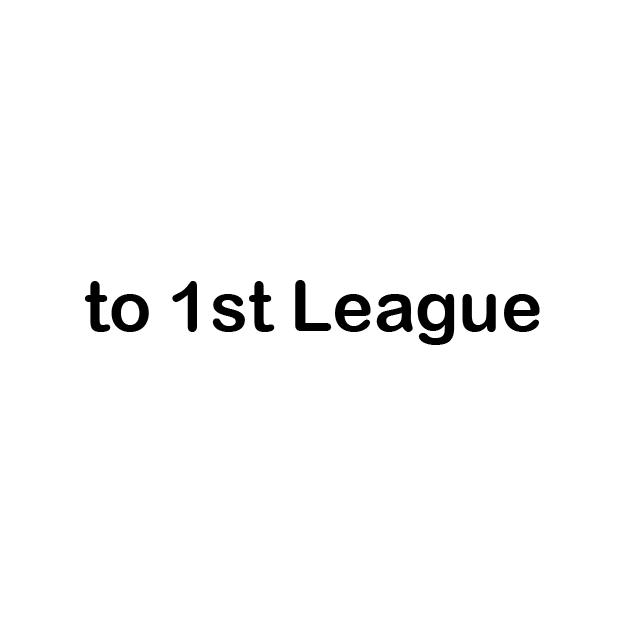
<style>
.page{position:relative;width:624px;height:624px;background:#ffffff}
.page>*{position:absolute;margin:0}
.t1{font:70px "ArialRoundedMTBold";color:#000000}
</style>
<div class="page">
<p class="t1" style="left:85px;top:280px;width:455px;height:65px">to 1st League</p>
</div>
